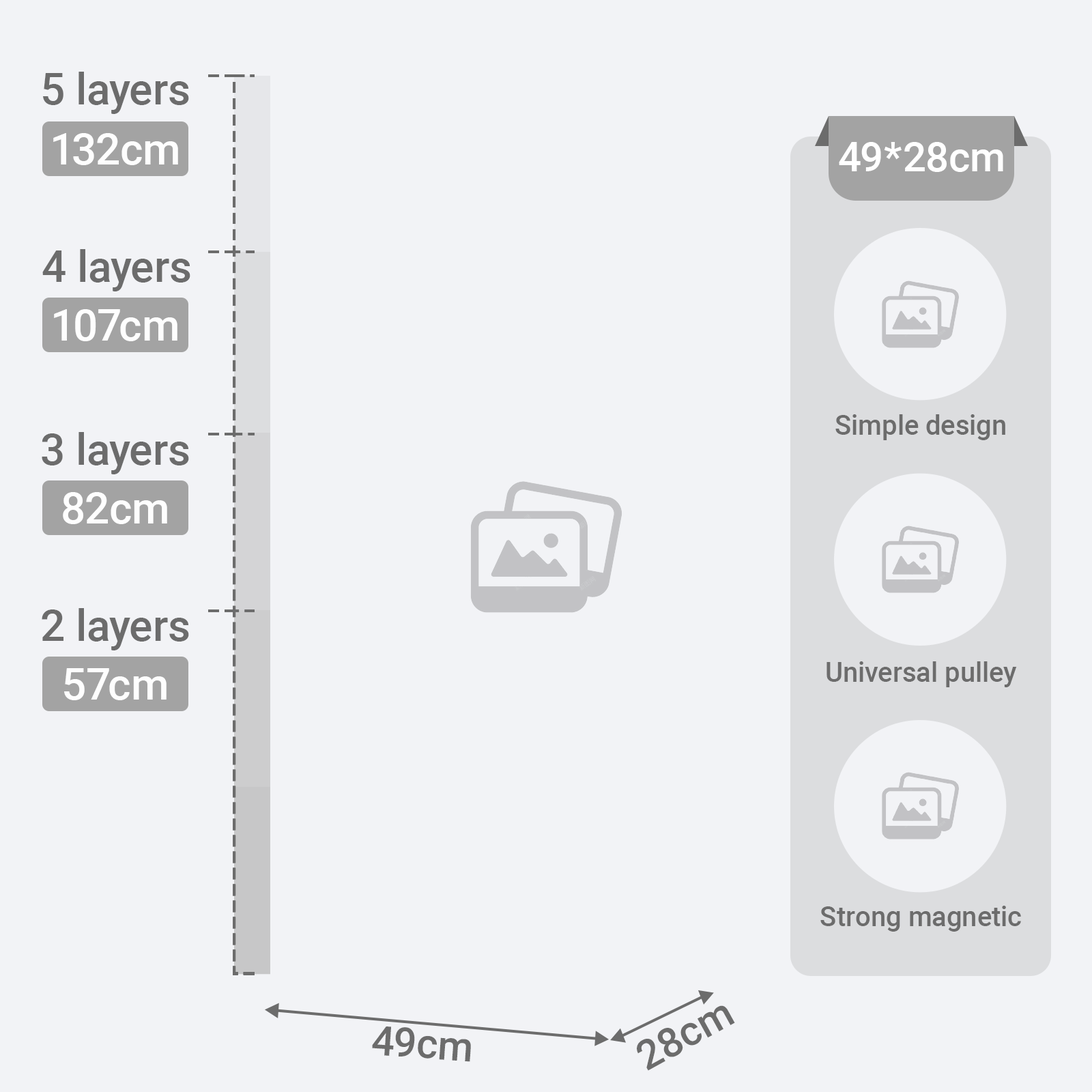
<style>
.page{position:relative;width:1092px;height:1092px;background:#f2f3f6}
.page>*{position:absolute;margin:0}
.t1{font:43.7px "Roboto-Medium";color:#6c6c6c}
.t2{font:43.7px "Roboto-Medium";color:#fefefe}
.t3{font:40.9px "Roboto-Medium";color:#ffffff}
.t4{font:27.3px "Roboto-Medium";color:#6c6c6c}
.t5{font:40.9px "Roboto-Medium";color:#6c6c6c}
</style>
<div class="page">
<p class="t1" style="left:43px;top:72px;width:146px;height:42px">5 layers</p>
<p class="t2" style="left:53px;top:133px;width:125px;height:32px">132cm</p>
<p class="t3" style="left:839px;top:142px;width:164px;height:30px">49*28cm</p>
<p class="t1" style="left:42px;top:249px;width:148px;height:42px">4 layers</p>
<p class="t2" style="left:54px;top:309px;width:123px;height:32px">107cm</p>
<p class="t4" style="left:835px;top:414px;width:170px;height:26px">Simple design</p>
<p class="t1" style="left:42px;top:432px;width:147px;height:42px">3 layers</p>
<p class="t2" style="left:63px;top:492px;width:104px;height:32px">82cm</p>
<p class="t1" style="left:42px;top:608px;width:147px;height:42px">2 layers</p>
<p class="t4" style="left:826px;top:661px;width:191px;height:26px">Universal pulley</p>
<p class="t2" style="left:64px;top:668px;width:103px;height:32px">57cm</p>
<p class="t4" style="left:820px;top:906px;width:201px;height:26px">Strong magnetic</p>
<p class="t5" style="left:637px;top:1005px;width:98px;height:66px;rotate:-29deg">28cm</p>
<p class="t5" style="left:372px;top:1026px;width:99px;height:36px;rotate:4deg">49cm</p>
</div>
